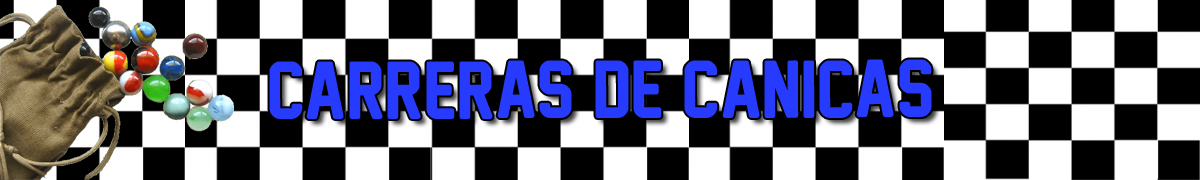
<style>
.page{position:relative;width:1200px;height:180px;background:#000000}
.page>*{position:absolute;margin:0}
.t1{font:75px "NewAthleticM54";color:#273bff}
</style>
<div class="page">
<p class="t1" style="left:269px;top:59px;width:663px;height:60px">Carreras de canicas</p>
</div>
